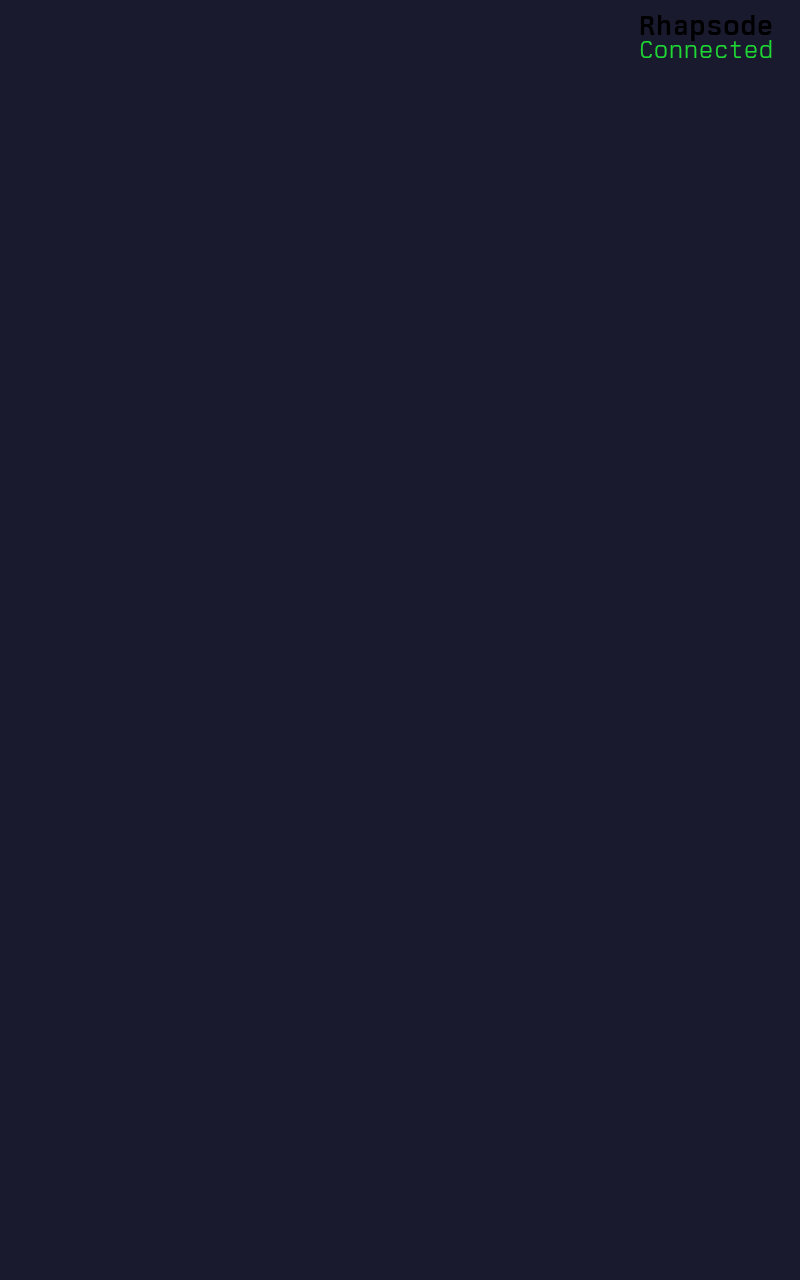
<style>
.page{position:relative;width:800px;height:1280px;background:#1a1a2e}
.page>*{position:absolute;margin:0}
.t1{font:28.1px "BerkeleyMono-Bold";color:#000000}
.t2{font:25px "BerkeleyMono-Light";color:#1ed734}
</style>
<div class="page">
<p class="t1" style="left:640px;top:15px;width:132px;height:26px">Rhapsode</p>
<p class="t2" style="left:640px;top:40px;width:132px;height:18px">Connected</p>
</div>
